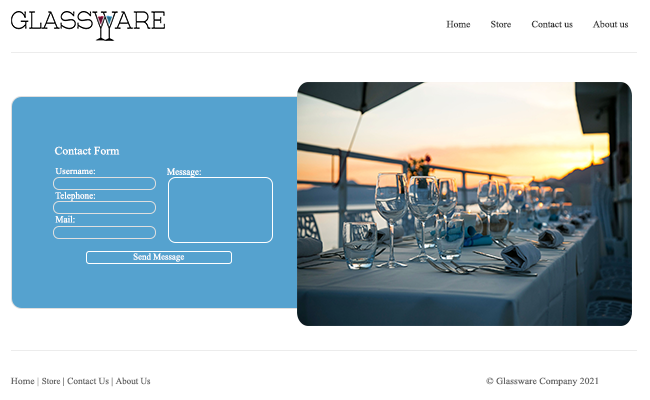
<style>
.page{position:relative;width:650px;height:400px;background:#ffffff}
.page>*{position:absolute;margin:0}
.t1{font:9.6px "TimesNewRomanPSMT";color:#333333}
.t2{font:11.2px "TimesNewRomanPSMT";color:#ffffff;scale:1.04 1}
.t3{font:8.9px "TimesNewRomanPSMT";color:#ffffff;scale:1.04 1}
.t4{font:9.7px "TimesNewRomanPSMT";color:#ffffff;scale:0.95 1}
.t5{font:9.1px "TimesNewRomanPSMT";color:#ffffff}
.t6{font:9.3px "TimesNewRomanPSMT";color:#666666;scale:1.04 1}
.t7{font:9px "TimesNewRomanPSMT";color:#666666}
.t8{font:9.3px "TimesNewRomanPSMT";color:#666666}
.t9{font:9.3px "TimesNewRomanPSMT";color:#666666;scale:0.97 1}
.t10{font:9.3px "TimesNewRomanPSMT";color:#666666;scale:1.05 1}
</style>
<div class="page">
<p class="t1" style="left:446px;top:20px;width:25px;height:8px">Home</p>
<p class="t1" style="left:491px;top:20px;width:20px;height:8px">Store</p>
<p class="t1" style="left:531px;top:20px;width:42px;height:8px">Contact us</p>
<p class="t1" style="left:592px;top:20px;width:37px;height:8px">About us</p>
<p class="t2" style="left:54px;top:146px;width:66px;height:9px">Contact Form</p>
<p class="t3" style="left:55px;top:168px;width:40px;height:7px">Username:</p>
<p class="t4" style="left:167px;top:168px;width:34px;height:9px">Message:</p>
<p class="t4" style="left:55px;top:191px;width:40px;height:10px">Telephone:</p>
<p class="t4" style="left:55px;top:215px;width:20px;height:8px">Mail:</p>
<p class="t5" style="left:133px;top:253px;width:52px;height:9px">Send Message</p>
<p class="t6" style="left:10px;top:377px;width:29px;height:10px">Home |</p>
<p class="t7" style="left:42px;top:377px;width:22px;height:9px">Store |</p>
<p class="t8" style="left:67px;top:377px;width:46px;height:10px">Contact Us |</p>
<p class="t9" style="left:115px;top:377px;width:36px;height:8px">About Us</p>
<p class="t10" style="left:486px;top:377px;width:113px;height:10px">© Glassware Company 2021</p>
</div>
